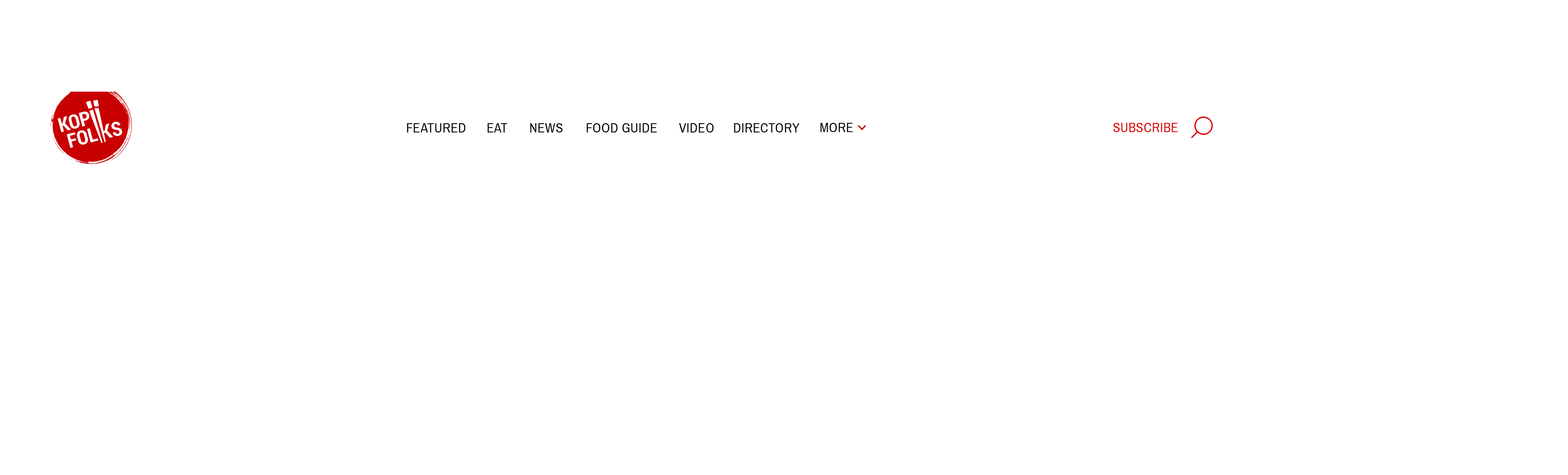
<style>
.page{position:relative;width:1568px;height:475px;background:#ffffff}
.page>*{position:absolute;margin:0}
.t1{font:13.4px "ArchivoNarrow-Regular";letter-spacing:0.02em;color:#000000;text-transform:uppercase}
.t2{font:13.4px "ArchivoNarrow-Regular";letter-spacing:0.02em;color:#db0000;text-transform:uppercase}
</style>
<div class="page">
<p class="t1" style="left:407px;top:123px;width:59px;height:10px">FeatureD</p>
<p class="t1" style="left:487px;top:123px;width:20px;height:10px">eat</p>
<p class="t1" style="left:530px;top:123px;width:33px;height:10px">News</p>
<p class="t1" style="left:587px;top:123px;width:70px;height:10px">FOOD GUIDE</p>
<p class="t1" style="left:679px;top:123px;width:35px;height:10px">VIDEO</p>
<p class="t1" style="left:734px;top:123px;width:66px;height:10px">DIRECTORY</p>
<p class="t1" style="left:820px;top:123px;width:33px;height:9px">More</p>
<p class="t2" style="left:1113px;top:123px;width:64px;height:9px">subscribe</p>
</div>
